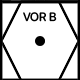
<style>
.page{position:relative;width:80px;height:80px;background:#ffffff}
.page>*{position:absolute;margin:0}
.t1{font:12px "SFProRounded-Medium"}
</style>
<div class="page">
<p class="t1" style="left:23px;top:11px;width:34px;height:10px">VOR B</p>
</div>
